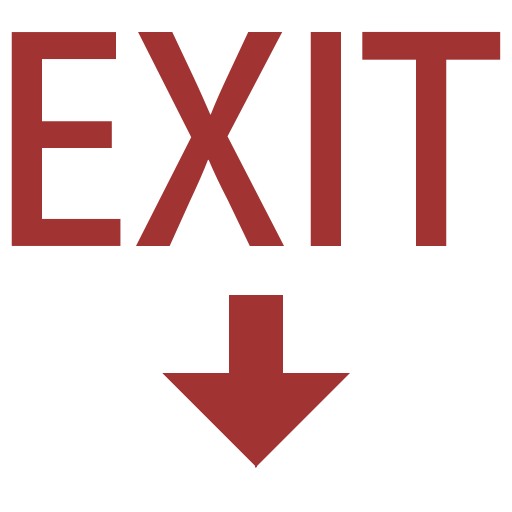
<style>
.page{position:relative;width:512px;height:512px;background:#ffffff}
.page>*{position:absolute;margin:0}
.t1{font:279.3px "AdobeHeitiStd-Regular";color:#a13333;scale:0.93 1}
</style>
<div class="page">
<p class="t1" style="left:11px;top:31px;width:490px;height:215px">EXIT</p>
</div>
